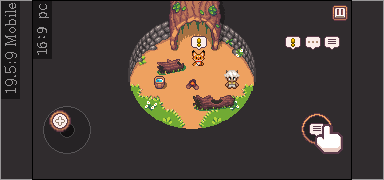
<style>
.page{position:relative;width:384px;height:180px;background:#302c2e}
.page>*{position:absolute;margin:0}
.t1{font:14px "AdobeMyungjoStd-Medium";color:#989697}
.t2{font:15px "D2Codingligature";color:#989697}
</style>
<div class="page">
<p class="t1" style="left:4px;top:3px;width:13px;height:90px;rotate:-90deg">19.5:9 Mobile</p>
<p class="t2" style="left:37px;top:4px;width:12px;height:51px;rotate:-90deg">16:9 pc</p>
</div>
